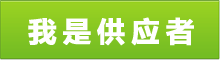
<style>
.page{position:relative;width:220px;height:60px}
.page>*{position:absolute;margin:0}
.t1{font:28px "MicrosoftYaHei";letter-spacing:0.2em;color:#ffffff;font-weight:bold}
</style>
<div class="page">
<p class="t1" style="left:28px;top:17px;width:166px;height:29px">我是供应者</p>
</div>
